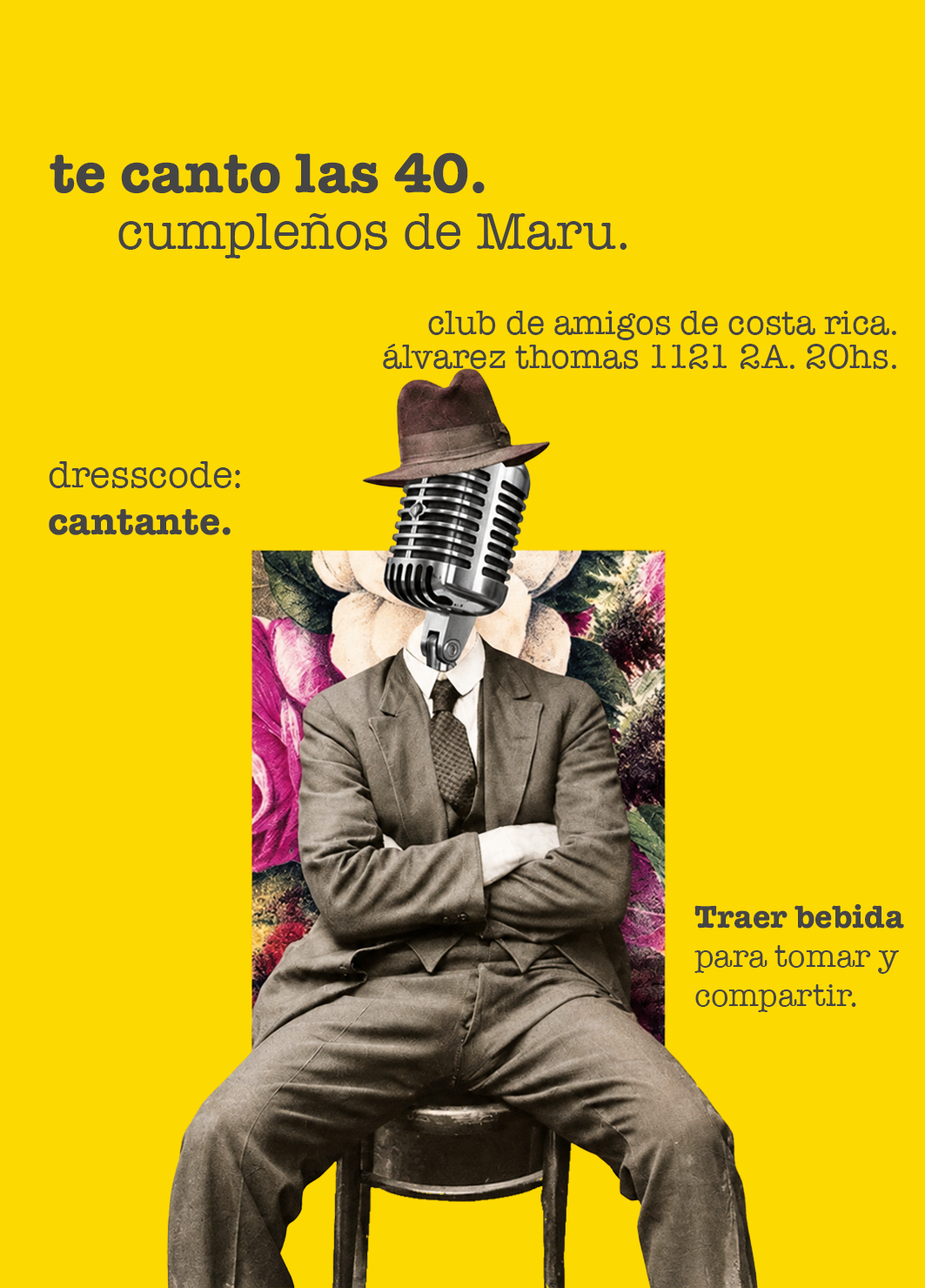
<style>
.page{position:relative;width:925px;height:1288px;background:#fdd902}
.page>*{position:absolute;margin:0}
.t1{font:57.7px "AmericanTypewriter-Bold";color:#454545}
.t2{font:53.1px "AmericanTypewriter";color:#454545}
.t3{font:34.8px "AmericanTypewriter";color:#454545}
.t4{font:38.7px "AmericanTypewriter";color:#454545}
.t5{font:38.7px "AmericanTypewriter-Bold";color:#454545}
.t6{font:32.6px "AmericanTypewriter";color:#454545}
.t7{font:32.6px "AmericanTypewriter-Bold";color:#454545}
</style>
<div class="page">
<p class="t1" style="left:50px;top:152px;width:435px;height:42px">te canto las 40.</p>
<p class="t2" style="left:118px;top:213px;width:510px;height:46px">cumpleños de Maru.</p>
<p class="t3" style="left:428px;top:311px;width:469px;height:29px">club de amigos de costa rica.</p>
<p class="t3" style="left:383px;top:344px;width:514px;height:25px">álvarez thomas 1121 2A. 20hs.</p>
<p class="t4" style="left:49px;top:461px;width:191px;height:74px">dresscode:<br><span class="t5">cantante.</span></p>
<p class="t6" style="left:695px;top:905px;width:210px;height:108px"><span class="t7">Traer bebida </span>para tomar y compartir.</p>
</div>
